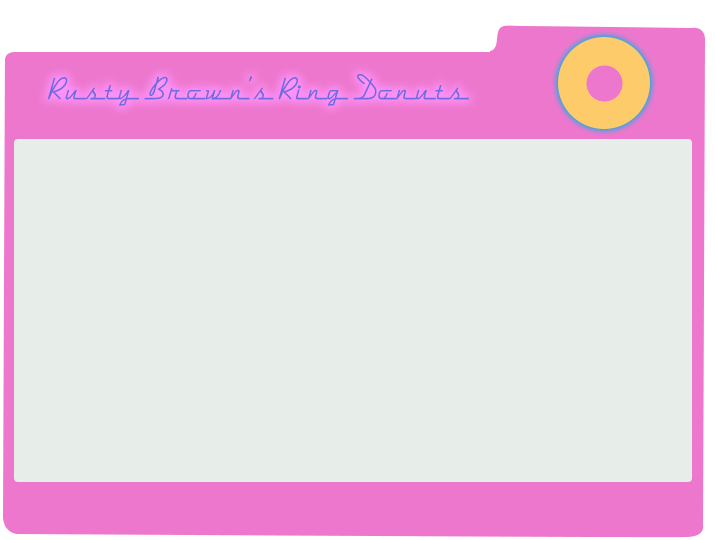
<style>
.page{position:relative;width:715px;height:540px;background:#e7ede9}
.page>*{position:absolute;margin:0}
.t1{font:35px "DymaxionScript";letter-spacing:0.01em;color:#6e6ae2}
</style>
<div class="page">
<p class="t1" style="left:47px;top:74px;width:422px;height:32px">Rusty Brown’s Ring Donuts</p>
</div>
